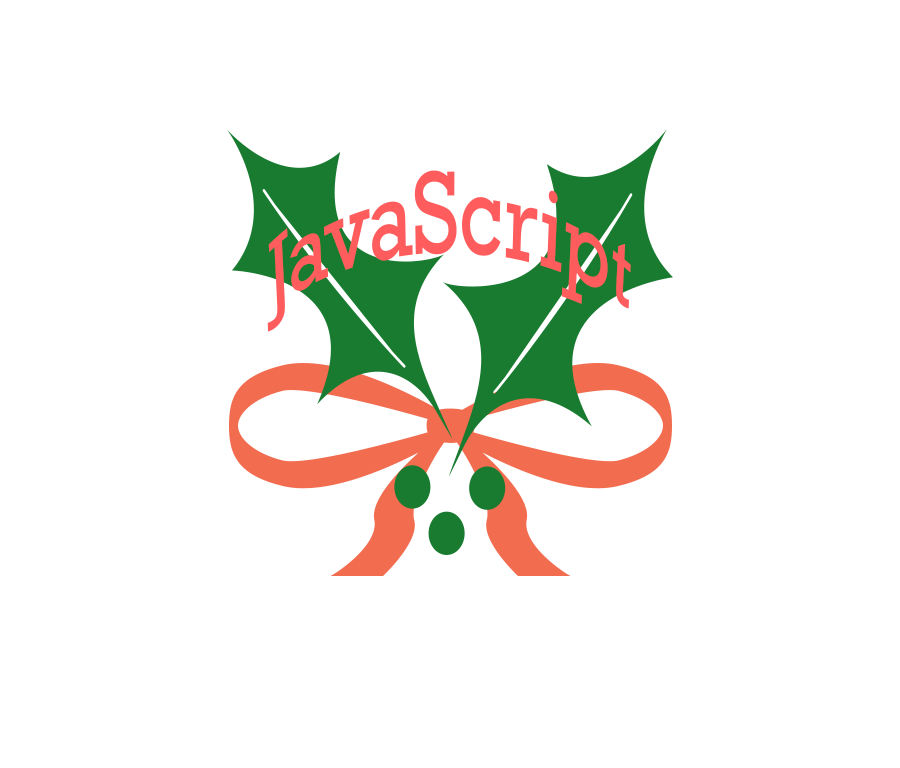
<style>
.page{position:relative;width:900px;height:768px;background:#ffffff}
.page>*{position:absolute;margin:0}
.t1{font:75px "Rockwell";color:#ff5d5d}
</style>
<div class="page">
<p class="t1" style="left:267px;top:170px;width:364px;height:162px;text-align:center">JavaScript</p>
</div>
